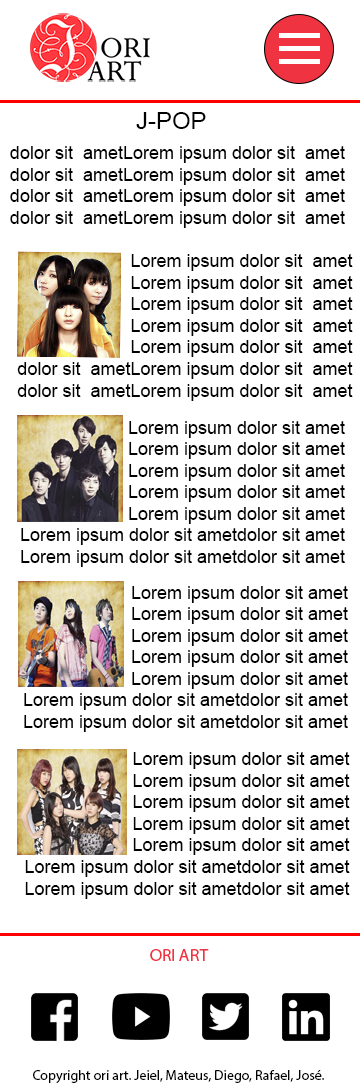
<style>
.page{position:relative;width:360px;height:1089px;background:#ffffff}
.page>*{position:absolute;margin:0}
.t1{font:24px "ArialMT";color:#000000}
.t2{font:18px "ArialMT";color:#000000}
</style>
<div class="page">
<p class="t1" style="left:136px;top:112px;width:70px;height:17px">J-POP</p>
<p class="t2" style="left:10px;top:146px;width:335px;height:82px;text-align:right">dolor sit  ametLorem ipsum dolor sit  amet<br>dolor sit  ametLorem ipsum dolor sit  amet<br>dolor sit  ametLorem ipsum dolor sit  amet<br>dolor sit  ametLorem ipsum dolor sit  amet</p>
<p class="t2" style="left:17px;top:254px;width:336px;height:147px;text-align:right">Lorem ipsum dolor sit  amet<br>Lorem ipsum dolor sit  amet<br>Lorem ipsum dolor sit  amet<br>Lorem ipsum dolor sit  amet<br>Lorem ipsum dolor sit  amet<br>dolor sit  ametLorem ipsum dolor sit  amet<br>dolor sit  ametLorem ipsum dolor sit  amet</p>
<p class="t2" style="left:21px;top:421px;width:324px;height:146px;text-align:right">Lorem ipsum dolor sit amet<br>Lorem ipsum dolor sit amet<br>Lorem ipsum dolor sit amet<br>Lorem ipsum dolor sit amet<br>Lorem ipsum dolor sit amet<br>Lorem ipsum dolor sit ametdolor sit amet<br>Lorem ipsum dolor sit ametdolor sit amet</p>
<p class="t2" style="left:24px;top:586px;width:324px;height:146px;text-align:right">Lorem ipsum dolor sit amet<br>Lorem ipsum dolor sit amet<br>Lorem ipsum dolor sit amet<br>Lorem ipsum dolor sit amet<br>Lorem ipsum dolor sit amet<br>Lorem ipsum dolor sit ametdolor sit amet<br>Lorem ipsum dolor sit ametdolor sit amet</p>
<p class="t2" style="left:25px;top:752px;width:325px;height:147px;text-align:right">Lorem ipsum dolor sit amet<br>Lorem ipsum dolor sit amet<br>Lorem ipsum dolor sit amet<br>Lorem ipsum dolor sit amet<br>Lorem ipsum dolor sit amet<br>Lorem ipsum dolor sit ametdolor sit amet<br>Lorem ipsum dolor sit ametdolor sit amet</p>
</div>
